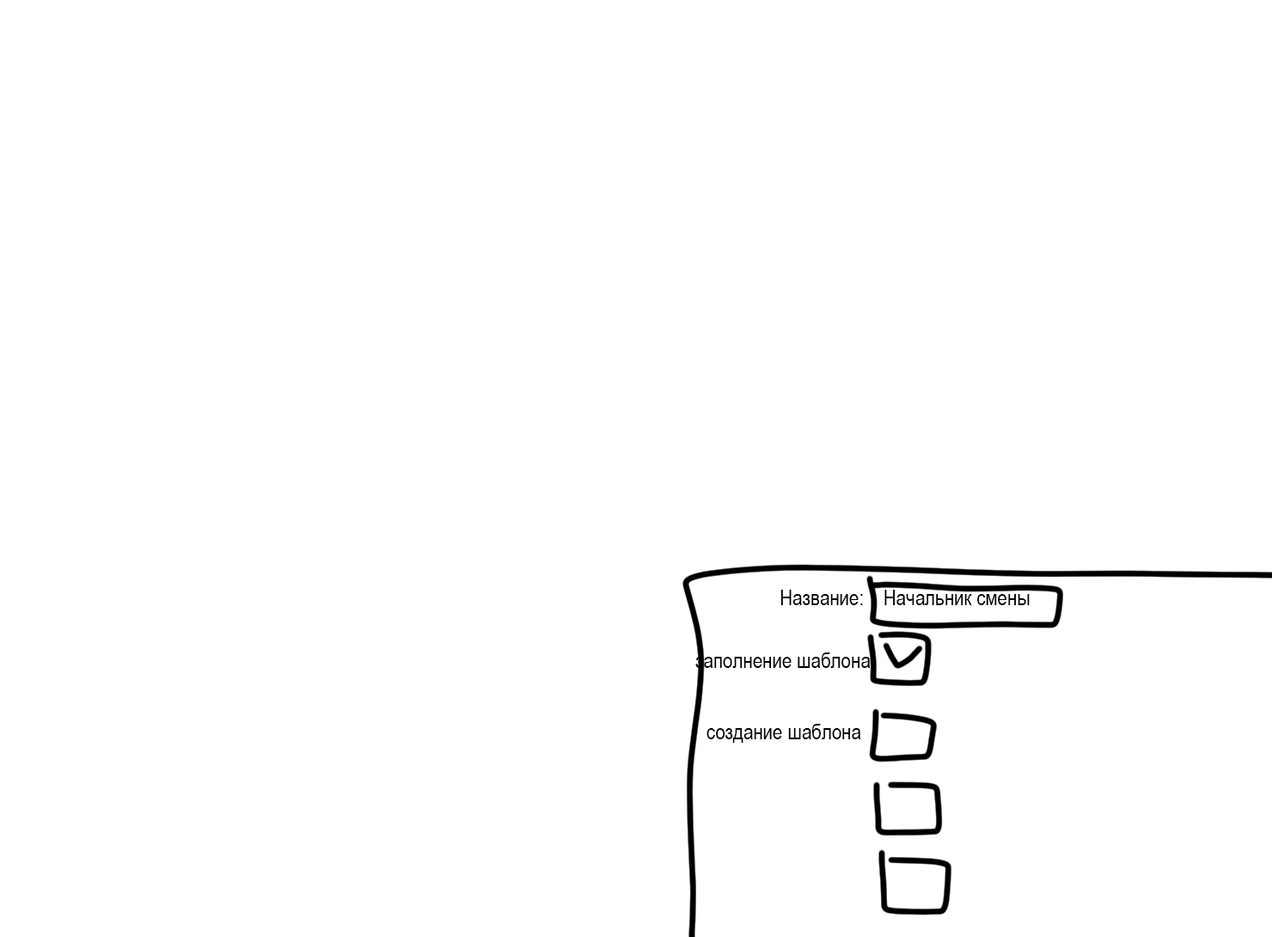
<style>
.page{position:relative;width:1272px;height:937px;background:#ffffff}
.page>*{position:absolute;margin:0}
.t1{font:21.5px "ArialNarrow";color:#000000}
</style>
<div class="page">
<p class="t1" style="left:781px;top:590px;width:249px;height:15px">Название:    Начальник смены</p>
<p class="t1" style="left:696px;top:653px;width:175px;height:15px">заполнение шаблона</p>
<p class="t1" style="left:707px;top:724px;width:154px;height:19px">создание шаблона</p>
</div>
